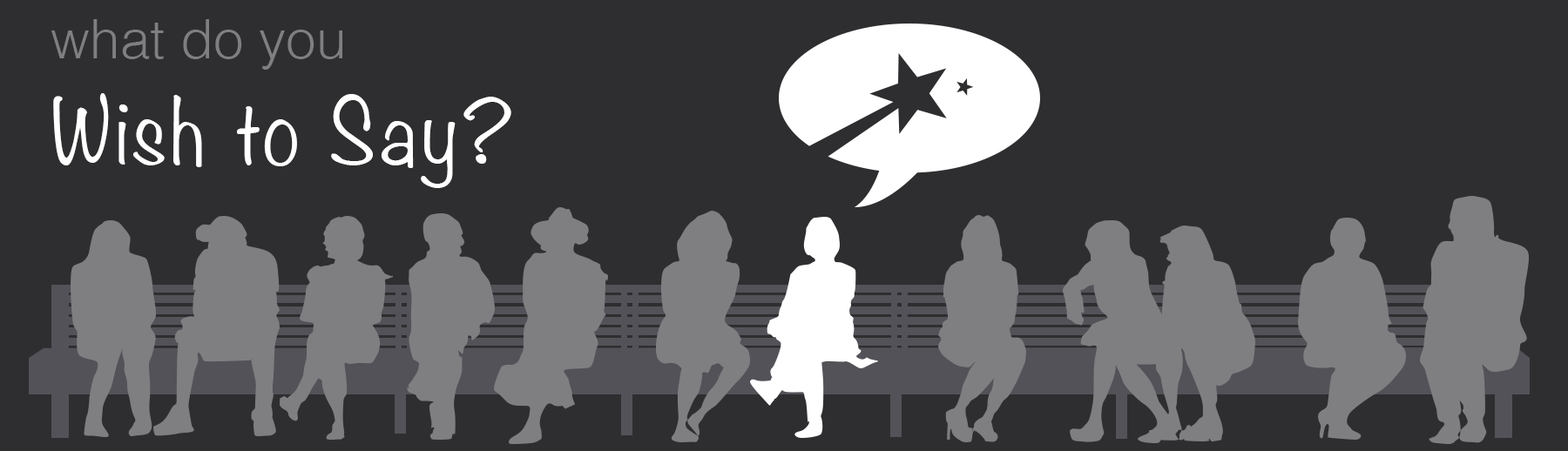
<style>
.page{position:relative;width:1568px;height:451px;background:#2e2e30}
.page>*{position:absolute;margin:0}
.t1{font:80.9px/104.8px "Noteworthy-Light";letter-spacing:0.05em;color:#ffffff}
.t2{font:54px/104.8px "Helvetica-Light";color:#7f7e81}
</style>
<div class="page">
<p class="t1" style="left:51px;top:19px;width:460px;height:169px"><span class="t2">what do you<br></span>Wish to Say?</p>
</div>
